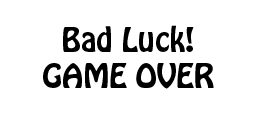
<style>
.page{position:relative;width:256px;height:128px;background:#ffffff}
.page>*{position:absolute;margin:0}
.t1{font:30px "HoboStd";color:#000000}
</style>
<div class="page">
<p class="t1" style="left:43px;top:25px;width:171px;height:64px;text-align:center">Bad Luck!<br>GAME OVER</p>
</div>
